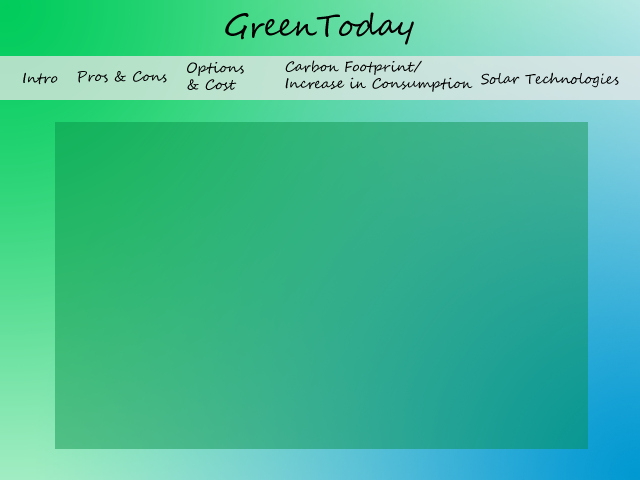
<style>
.page{position:relative;width:640px;height:480px}
.page>*{position:absolute;margin:0}
.t1{font:14px "SegoeScript";color:#000000}
</style>
<div class="page">
<p class="t1" style="left:187px;top:62px;width:57px;height:29px">Options <br>&amp; Cost</p>
<p class="t1" style="left:285px;top:60px;width:188px;height:32px">Carbon Footprint/<br>Increase in Consumption</p>
<p class="t1" style="left:23px;top:72px;width:35px;height:13px">Intro</p>
<p class="t1" style="left:77px;top:71px;width:90px;height:12px">Pros &amp; Cons</p>
<p class="t1" style="left:481px;top:72px;width:138px;height:16px">Solar Technologies</p>
</div>
